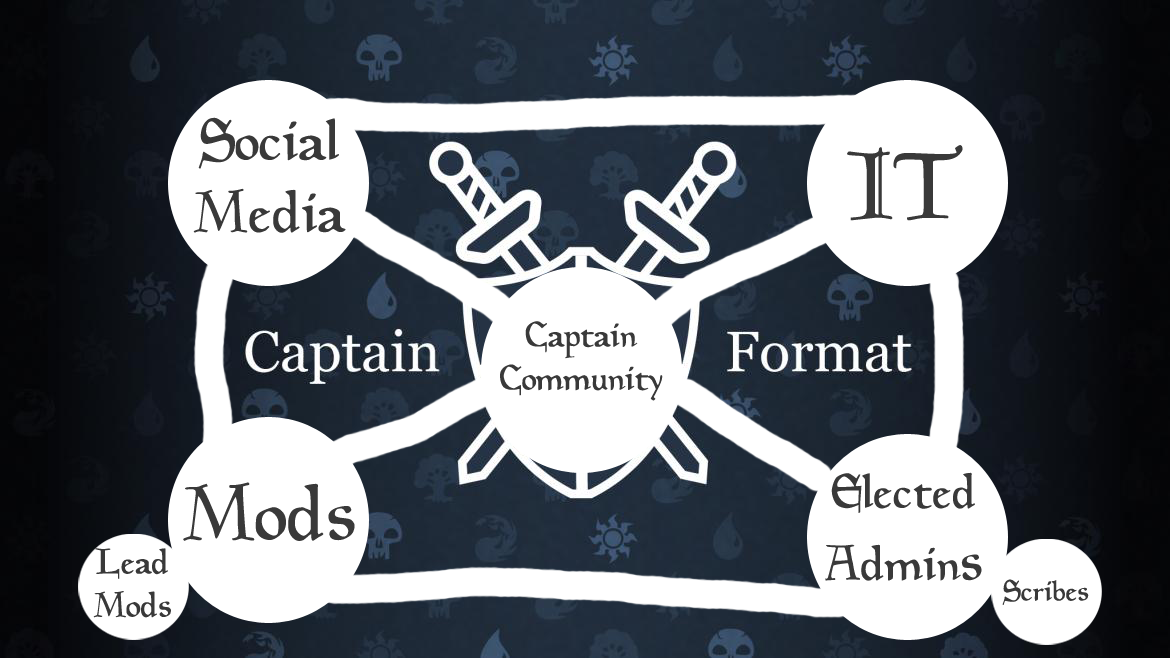
<style>
.page{position:relative;width:1170px;height:658px;background:#ffffff}
.page>*{position:absolute;margin:0}
.t1{font:60px "Magic:theGathering";color:#393939}
.t2{font:100px "Magic:theGathering";color:#393939}
.t3{font:36px "Magic:theGathering";color:#393939}
.t4{font:50px "Magic:theGathering";color:#393939}
.t5{font:80px "Magic:theGathering";color:#393939}
.t6{font:30px "Magic:theGathering";color:#393939}
</style>
<div class="page">
<p class="t1" style="left:193px;top:117px;width:153px;height:116px;text-align:center">Social Media</p>
<p class="t2" style="left:847px;top:145px;width:116px;height:76px">IT</p>
<p class="t3" style="left:500px;top:321px;width:163px;height:80px;text-align:center">Captain<br>Community</p>
<p class="t4" style="left:825px;top:472px;width:157px;height:109px;text-align:center">Elected <br>Admin<span class="t1">s</span></p>
<p class="t5" style="left:183px;top:482px;width:172px;height:59px">Mods</p>
<p class="t3" style="left:93px;top:548px;width:78px;height:70px;text-align:center">Lead Mods</p>
<p class="t6" style="left:1002px;top:579px;width:87px;height:26px">Scribes</p>
</div>
